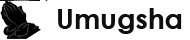
<style>
.page{position:relative;width:190px;height:40px;background:#ffffff}
.page>*{position:absolute;margin:0}
.t1{font:28px "CenturyGothic-Bold";color:#0f0f0f}
</style>
<div class="page">
<p class="t1" style="left:58px;top:8px;width:124px;height:26px">Umugsha</p>
</div>
